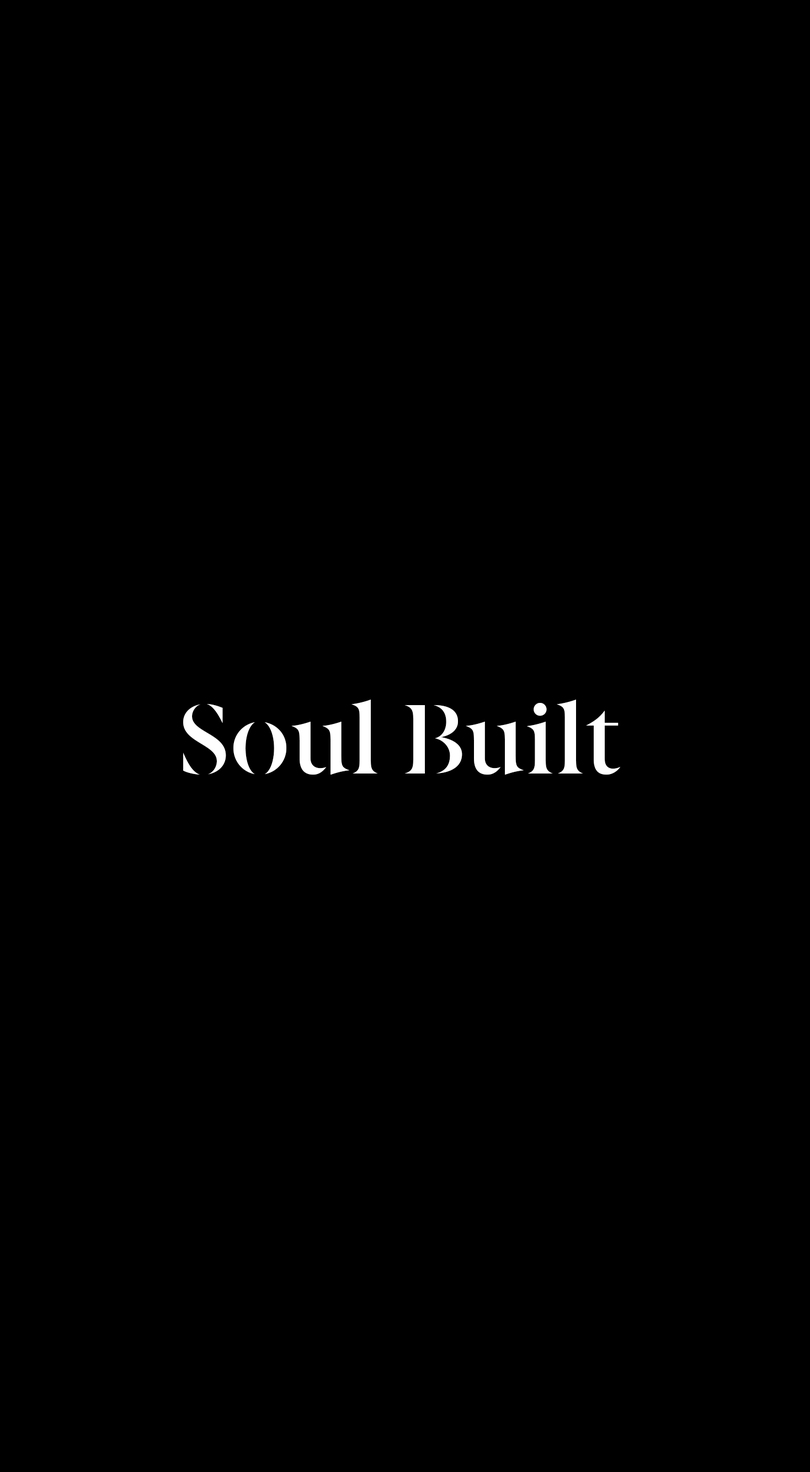
<style>
.page{position:relative;width:810px;height:1472px;background:#000000}
.page>*{position:absolute;margin:0}
.t1{font:99.3px "BerlingskeSerifSt-DBd";color:#ffffff}
</style>
<div class="page">
<p class="t1" style="left:183px;top:700px;width:438px;height:75px">Soul Built</p>
</div>
